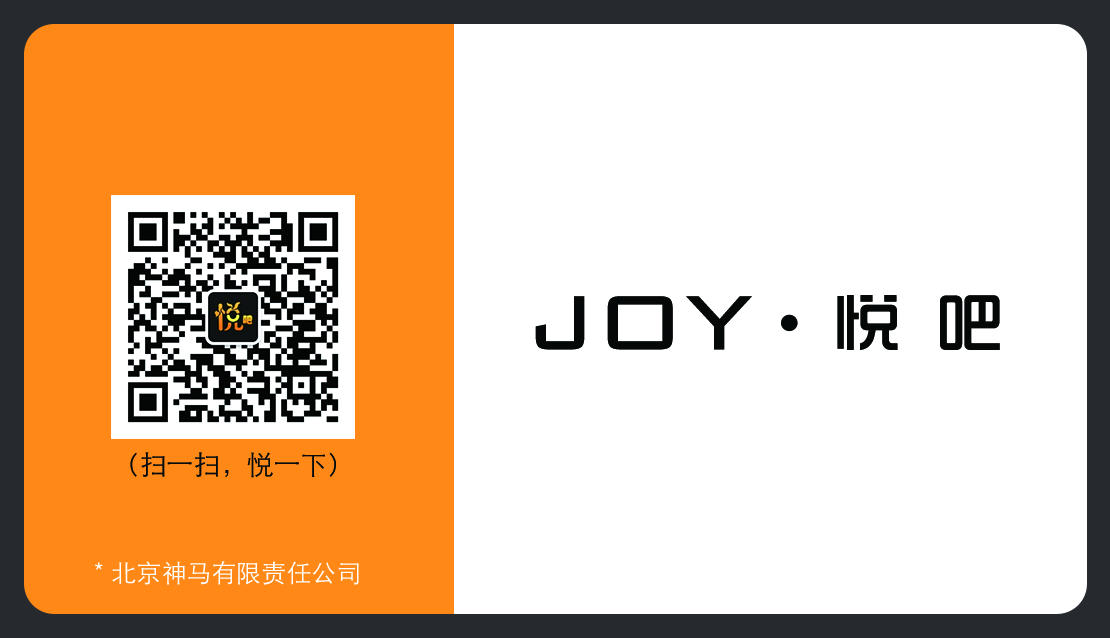
<style>
.page{position:relative;width:1110px;height:638px;background:#ffffff}
.page>*{position:absolute;margin:0}
.t1{font:125px "BankGothicBT-Light";color:#050505}
.t2{font:65.4px "ShiShangZhongHei";color:#050505;font-weight:bold}
.t3{font:26.9px "STHeitiSC-Light";color:#080b0b}
.t4{font:25px "STHeitiSC-Light";color:#ffffff;text-transform:uppercase}
</style>
<div class="page">
<p class="t1" style="left:535px;top:296px;width:217px;height:54px">joy</p>
<p class="t2" style="left:837px;top:295px;width:163px;height:55px">悦 吧</p>
<p class="t3" style="left:130px;top:452px;width:206px;height:26px">（扫一扫，悦一下）</p>
<p class="t4" style="left:95px;top:561px;width:264px;height:24px">＊北京神马有限责任公司</p>
</div>
